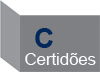
<style>
.page{position:relative;width:100px;height:72px;background:#7f8084}
.page>*{position:absolute;margin:0}
.t1{font:16.7px "ArialMT";color:#fcfcfd}
</style>
<div class="page">
<p class="t1" style="left:25px;top:53px;width:71px;height:12px">Certidões</p>
</div>
